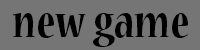
<style>
.page{position:relative;width:200px;height:50px;background:#757575}
.page>*{position:absolute;margin:0}
.t1{font:50px "NuevaStd-BoldCond";color:#000000}
</style>
<div class="page">
<p class="t1" style="left:12px;top:13px;width:176px;height:34px">new game</p>
</div>
